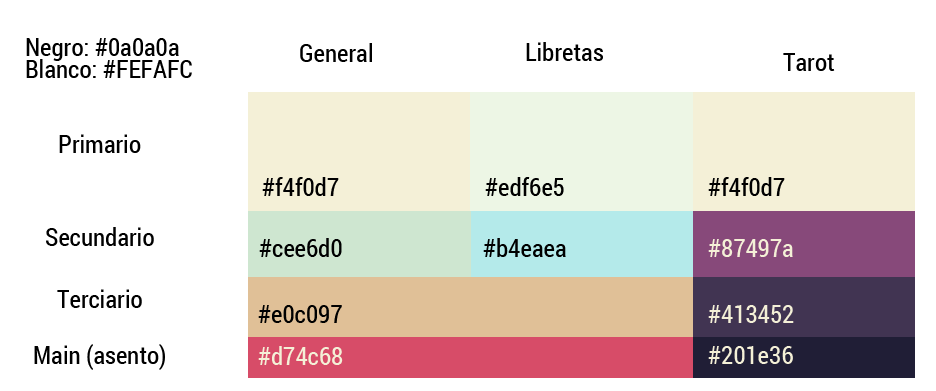
<style>
.page{position:relative;width:936px;height:391px;background:#ffffff}
.page>*{position:absolute;margin:0}
.t1{font:25px/21.9px "RobotoCondensed-Regular";color:#000000}
.t2{font:25px "RobotoCondensed-Regular";color:#000000}
.t3{font:25px "RobotoCondensed-Regular";color:#f4f0d7}
</style>
<div class="page">
<p class="t1" style="left:26px;top:38px;width:166px;height:40px">Negro: #0a0a0a<br>Blanco: #FEFAFC</p>
<p class="t2" style="left:300px;top:43px;width:72px;height:19px">General</p>
<p class="t2" style="left:526px;top:42px;width:77px;height:19px">Libretas</p>
<p class="t2" style="left:783px;top:53px;width:52px;height:18px">Tarot</p>
<p class="t2" style="left:59px;top:134px;width:82px;height:19px">Primario</p>
<p class="t2" style="left:262px;top:177px;width:77px;height:19px">#f4f0d7</p>
<p class="t2" style="left:485px;top:177px;width:79px;height:19px">#edf6e5</p>
<p class="t2" style="left:708px;top:177px;width:77px;height:19px">#f4f0d7</p>
<p class="t2" style="left:46px;top:227px;width:108px;height:19px">Secundario</p>
<p class="t2" style="left:259px;top:238px;width:83px;height:19px">#cee6d0</p>
<p class="t2" style="left:483px;top:238px;width:83px;height:19px">#b4eaea</p>
<p class="t3" style="left:708px;top:239px;width:85px;height:18px">#87497a</p>
<p class="t2" style="left:57px;top:289px;width:85px;height:19px">Terciario</p>
<p class="t2" style="left:258px;top:305px;width:84px;height:18px">#e0c097</p>
<p class="t3" style="left:708px;top:305px;width:86px;height:18px">#413452</p>
<p class="t2" style="left:34px;top:344px;width:131px;height:26px">Main (asento)</p>
<p class="t3" style="left:258px;top:346px;width:85px;height:19px">#d74c68</p>
<p class="t3" style="left:708px;top:346px;width:85px;height:18px">#201e36</p>
</div>
